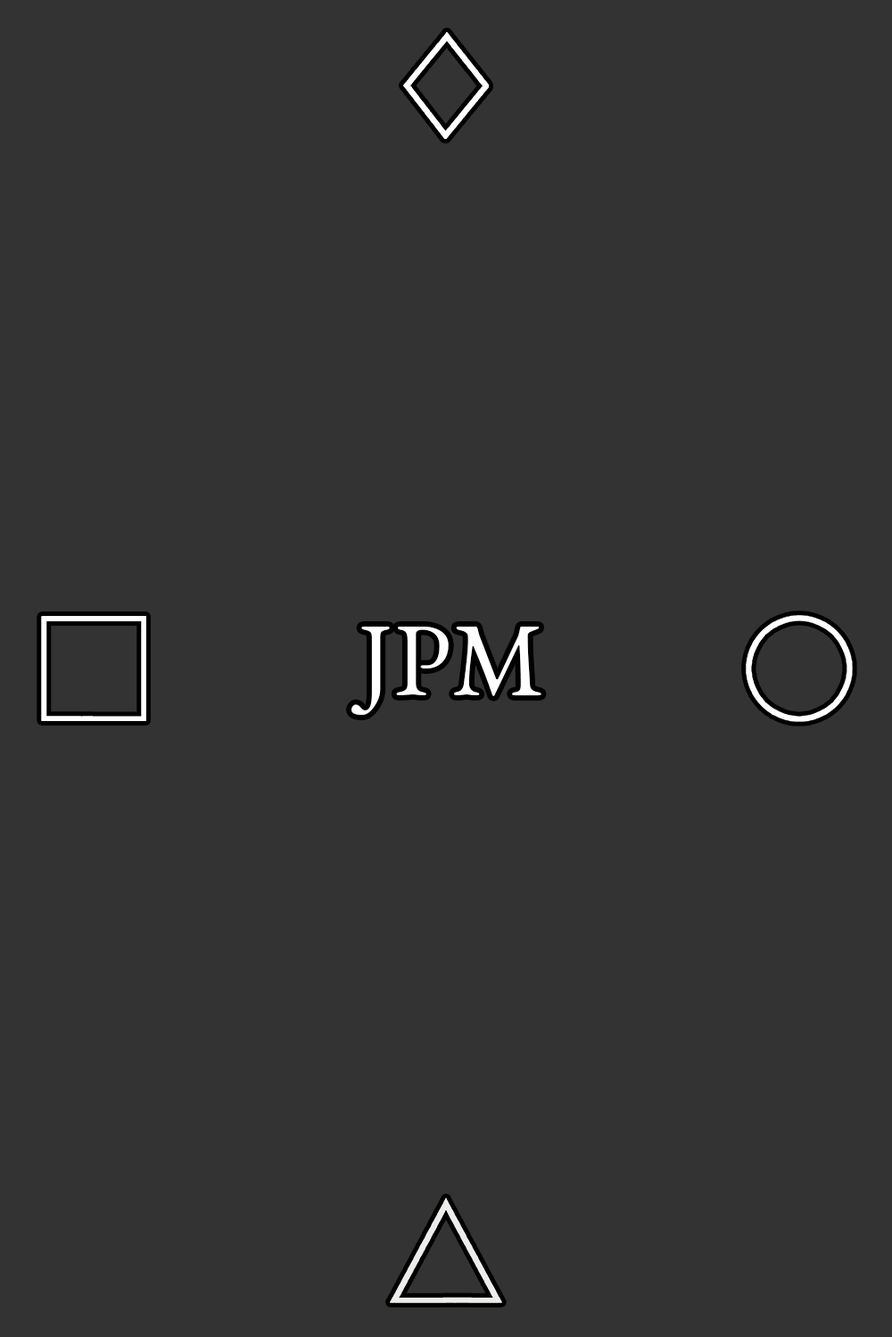
<style>
.page{position:relative;width:892px;height:1337px;background:#333333}
.page>*{position:absolute;margin:0}
.t1{font:102.5px "EBGaramond-Regular";letter-spacing:0.01em;color:#ffffff}
</style>
<div class="page">
<p class="t1" style="left:351px;top:627px;width:190px;height:88px">JPM</p>
</div>
